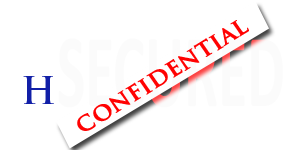
<style>
.page{position:relative;width:300px;height:150px;background:#ffffff}
.page>*{position:absolute;margin:0}
.t1{font:20.5px "TrajanPro-Bold";color:#ff0202;font-weight:bold;scale:1.07 1}
.t2{font:36px "TrajanPro-Bold";color:#111fa7}
</style>
<div class="page">
<p class="t1" style="left:77px;top:20px;width:172px;height:111px;rotate:-32deg">CONFIDENTIAL</p>
<p class="t2" style="left:23px;top:76px;width:31px;height:28px">H</p>
</div>
